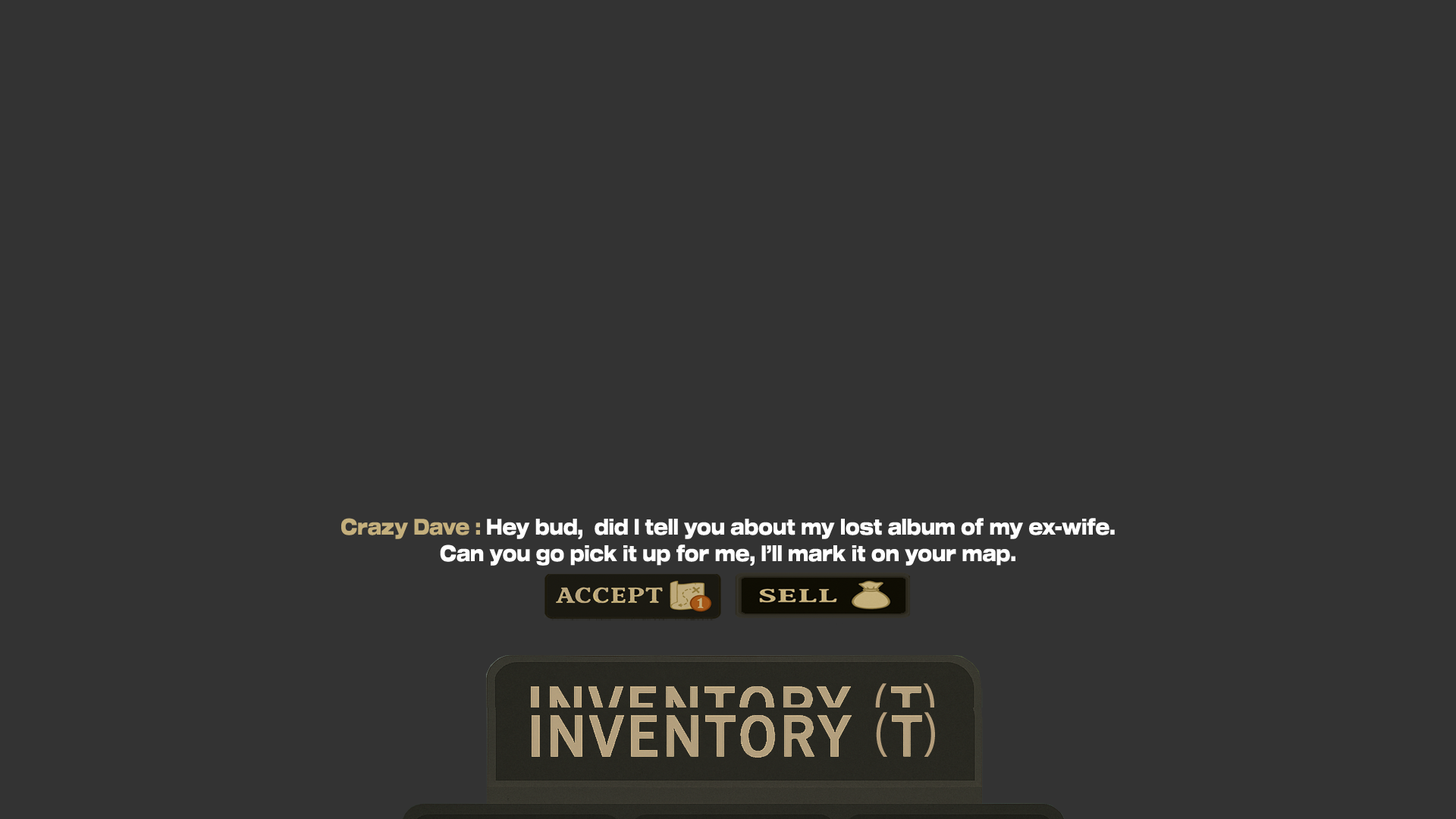
<style>
.page{position:relative;width:1456px;height:819px;background:#333333}
.page>*{position:absolute;margin:0}
.t1{font:22px "Sequel100Black-85";color:#ffffff;scale:0.71 1}
.t2{font:22px "Sequel100Black-85";color:#c4af7c;scale:0.71 1}
</style>
<div class="page">
<p class="t1" style="left:341px;top:518px;width:774px;height:48px;text-align:center"><span class="t2">Crazy Dave : </span>Hey bud,  did I tell you about my lost album of my ex-wife.<br>Can you go pick it up for me, I’ll mark it on your map.</p>
</div>
